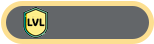
<style>
.page{position:relative;width:154px;height:44px;background:#636669}
.page>*{position:absolute;margin:0}
.t1{font:11px "MilkyNiceClean";color:#020204;scale:0.96 1}
</style>
<div class="page">
<p class="t1" style="left:27px;top:18px;width:18px;height:9px">LVL</p>
</div>
